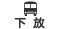
<style>
.page{position:relative;width:58px;height:29px;background:#ffffff}
.page>*{position:absolute;margin:0}
.t1{font:11px "MicrosoftYaHei";letter-spacing:0.01em;color:#333333;font-weight:bold}
</style>
<div class="page">
<p class="t1" style="left:14px;top:17px;width:31px;height:12px">下  放</p>
</div>
